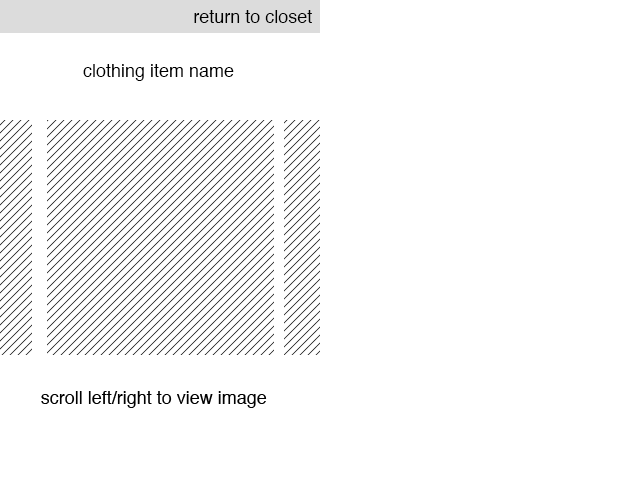
<style>
.page{position:relative;width:640px;height:480px;background:#ffffff}
.page>*{position:absolute;margin:0}
.t1{font:18px "Helvetica";color:#000000}
</style>
<div class="page">
<p class="t1" style="left:194px;top:10px;width:118px;height:13px">return to closet</p>
<p class="t1" style="left:83px;top:64px;width:151px;height:17px">clothing item name</p>
</div>
